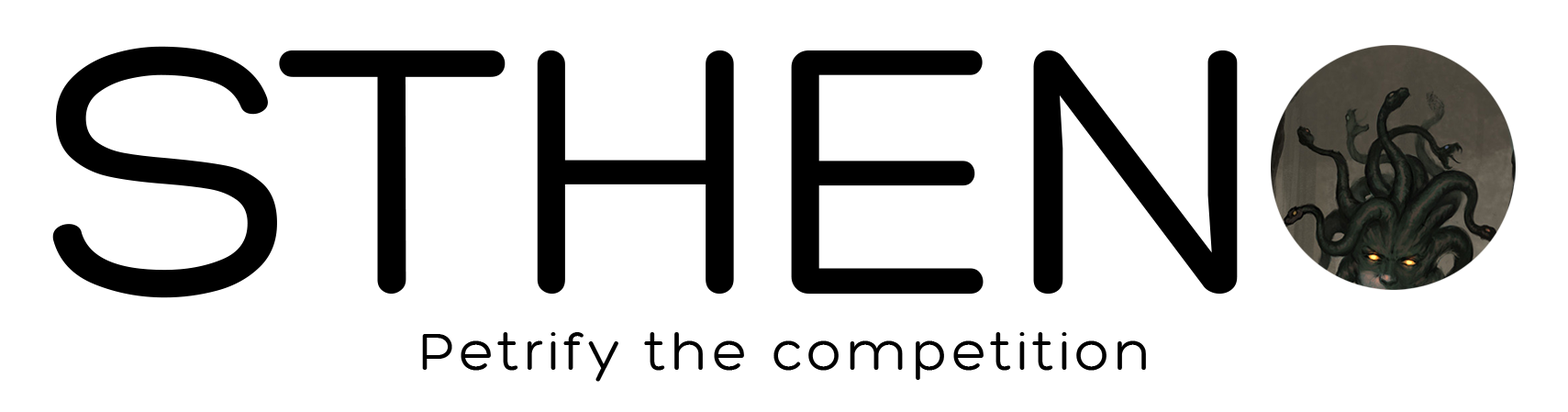
<style>
.page{position:relative;width:1568px;height:412px;background:#ffffff}
.page>*{position:absolute;margin:0}
.t1{font:382.3px "Hero-Regular";color:#000000}
.t2{font:57.3px "Hero-Regular";letter-spacing:0.075em;color:#000000}
</style>
<div class="page">
<p class="t1" style="left:52px;top:46px;width:1186px;height:252px">STHEN</p>
<p class="t2" style="left:422px;top:332px;width:724px;height:50px">Petrify the competition</p>
</div>
